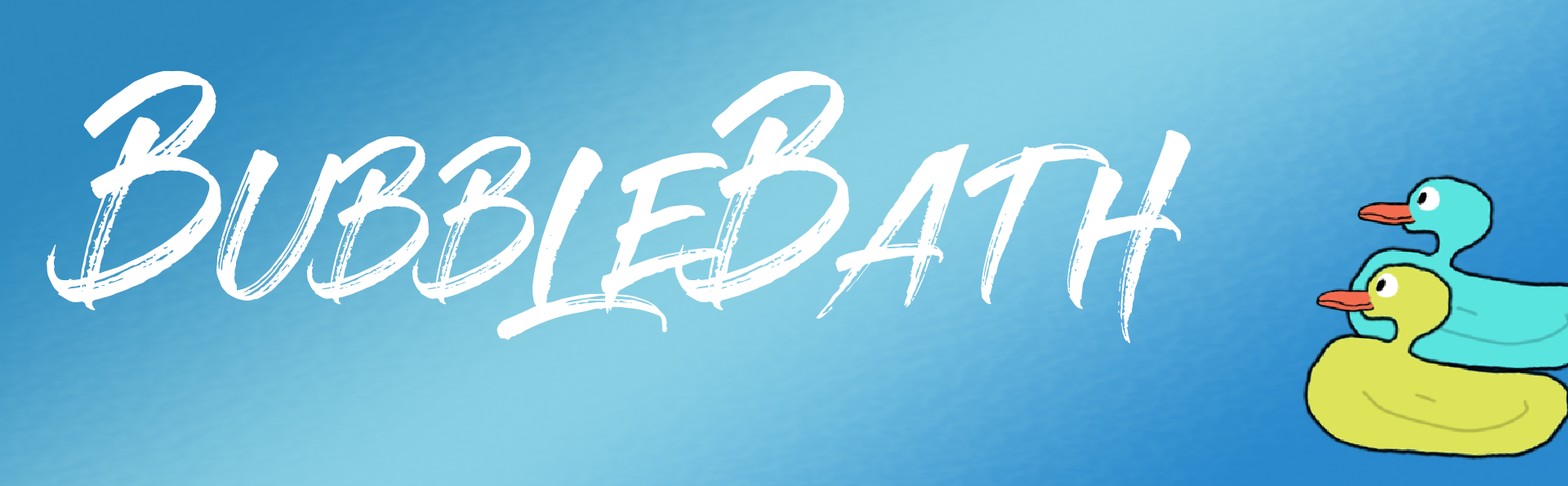
<style>
.page{position:relative;width:1568px;height:486px}
.page>*{position:absolute;margin:0}
.t1{font:199.1px "GlossAndBloom";color:#ffffff;font-variant:small-caps;scale:1.05 1}
</style>
<div class="page">
<p class="t1" style="left:47px;top:70px;width:1144px;height:274px">BubbleBath</p>
</div>
